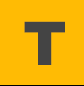
<style>
.page{position:relative;width:84px;height:86px;background:#ffbb04}
.page>*{position:absolute;margin:0}
.t1{font:60.3px "Arial-Black";color:#444444}
</style>
<div class="page">
<p class="t1" style="left:24px;top:21px;width:41px;height:44px">T</p>
</div>
